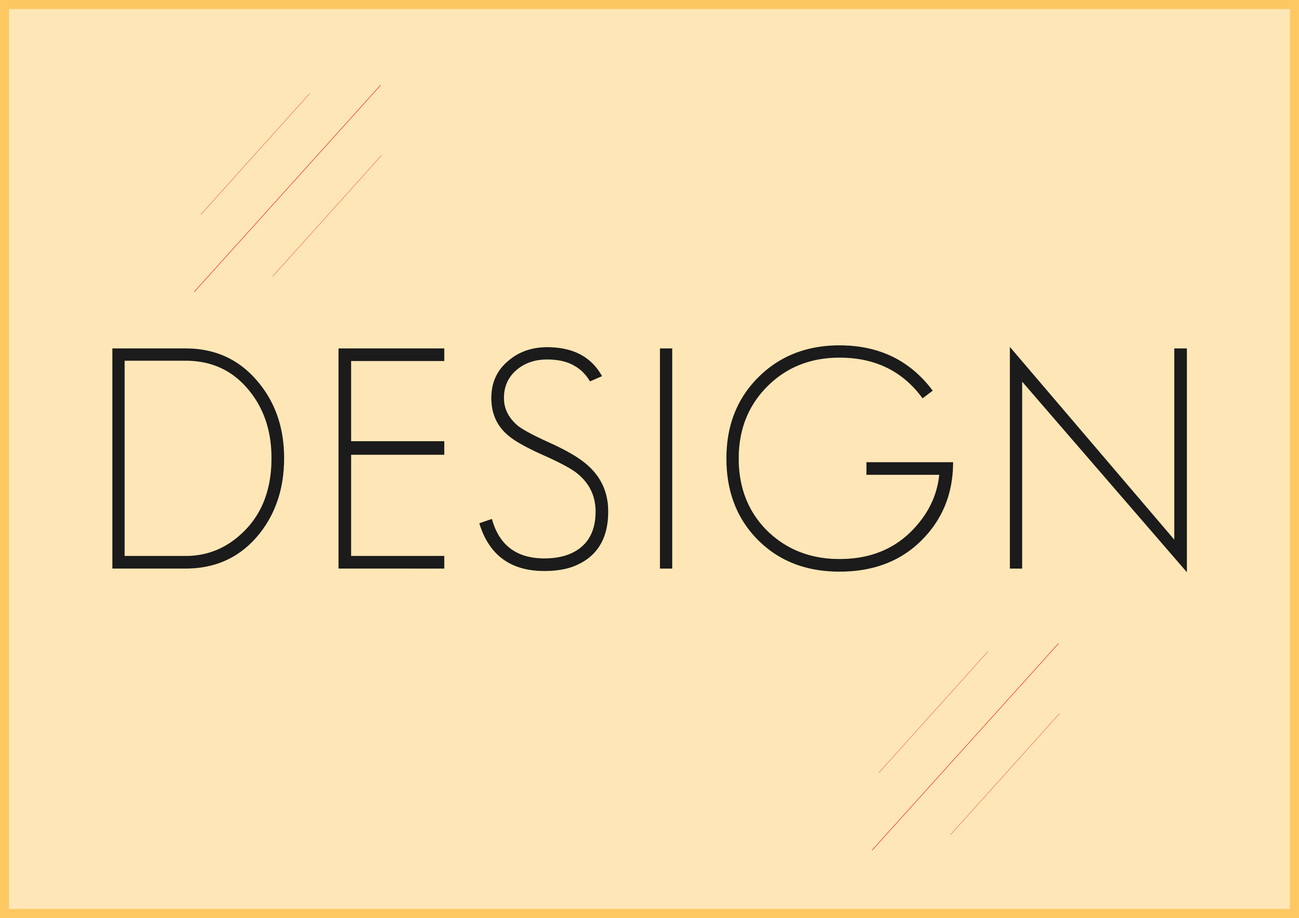
<style>
.page{position:relative;width:1299px;height:918px;background:#ffe6b6}
.page>*{position:absolute;margin:0}
.t1{font:308.5px "GeosansLight";letter-spacing:0.1em;color:#1b1b1b}
</style>
<div class="page">
<p class="t1" style="left:112px;top:345px;width:1075px;height:227px">DESIGN</p>
</div>
